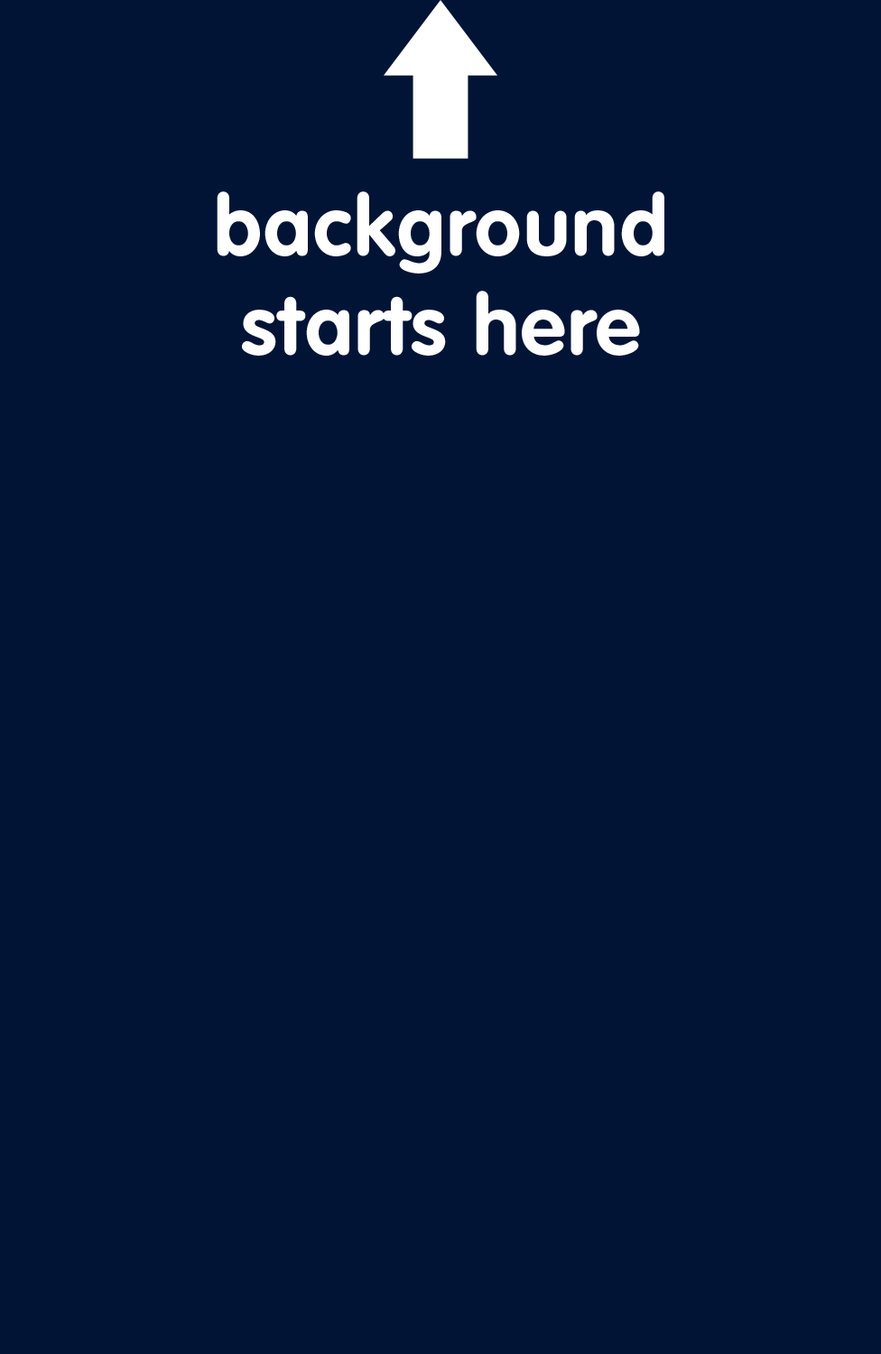
<style>
.page{position:relative;width:881px;height:1354px;background:#011436}
.page>*{position:absolute;margin:0}
.t1{font:83px "VAGRoundedStd-Bold";letter-spacing:0.025em;color:#ffffff}
</style>
<div class="page">
<p class="t1" style="left:217px;top:191px;width:447px;height:165px;text-align:center">background starts here</p>
</div>
